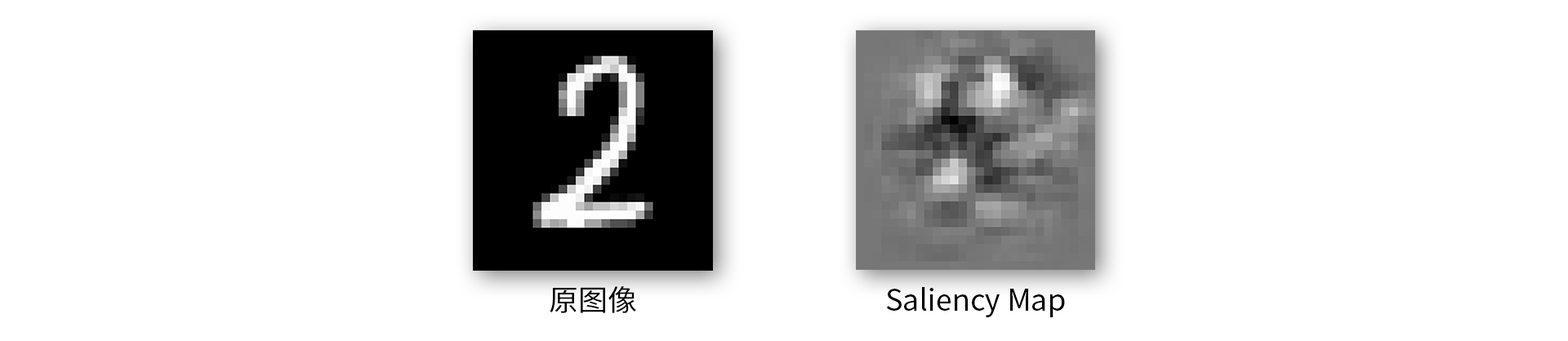
<style>
.page{position:relative;width:1568px;height:341px;background:#ffffff}
.page>*{position:absolute;margin:0}
.t1{font:29.4px "SourceHanSansCN-Regular";color:#000000}
</style>
<div class="page">
<p class="t1" style="left:550px;top:286px;width:86px;height:27px">原图像</p>
<p class="t1" style="left:886px;top:287px;width:179px;height:30px">Saliency Map</p>
</div>
